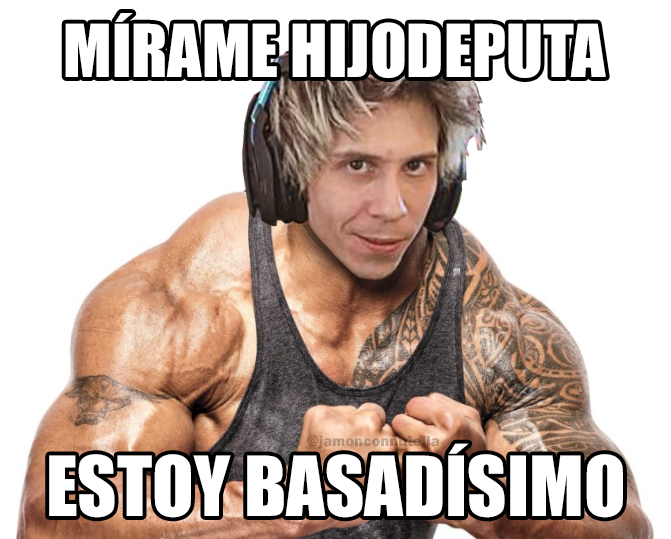
<style>
.page{position:relative;width:671px;height:539px;background:#ffffff}
.page>*{position:absolute;margin:0}
.t1{font:67.6px "Impact";color:#ffffff}
.t2{font:15.3px "FranklinGothic-Heavy"}
.t3{font:76.5px "Impact";color:#ffffff}
</style>
<div class="page">
<p class="t1" style="left:65px;top:13px;width:541px;height:65px">MÍRAME HIJODEPUTA</p>
<p class="t2" style="left:307px;top:435px;width:133px;height:14px">@jamonconnutella</p>
<p class="t3" style="left:49px;top:443px;width:574px;height:75px">ESTOY BASADÍSIMO</p>
</div>
